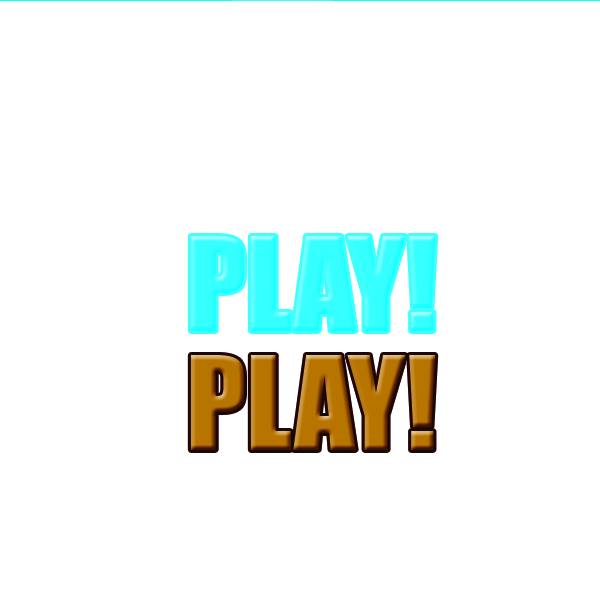
<style>
.page{position:relative;width:600px;height:600px;background:#ffffff}
.page>*{position:absolute;margin:0}
.t1{font:120px "Impact";color:#35ffff}
</style>
<div class="page">
<p class="t1" style="left:190px;top:235px;width:246px;height:95px">PLAY!</p>
</div>
